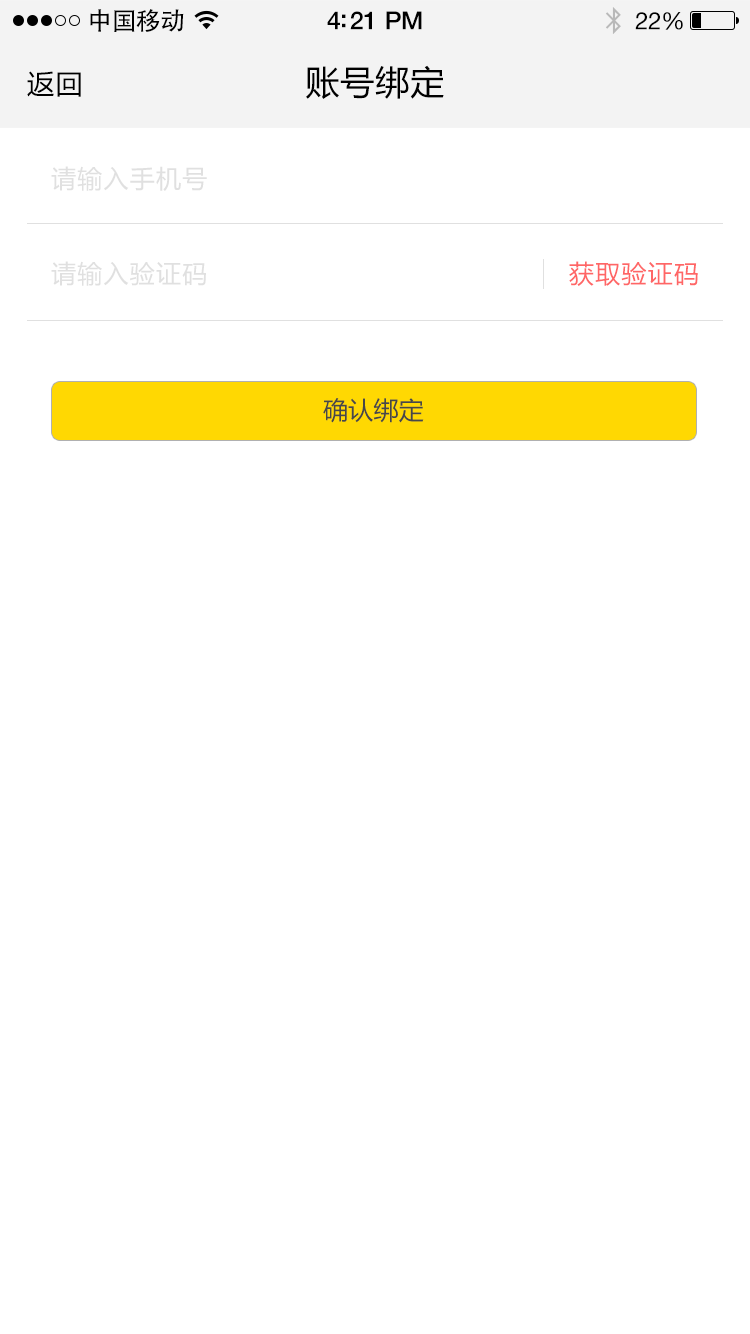
<style>
.page{position:relative;width:750px;height:1334px;background:#ffffff}
.page>*{position:absolute;margin:0}
.t1{font:25px "AdobeHeitiStd-Regular";letter-spacing:-0.025em;color:#000000}
.t2{font:25px "HelveticaNeue-Medium";letter-spacing:-0.02em;color:#000000}
.t3{font:24px "HelveticaNeue";letter-spacing:-0.02em;color:#000000}
.t4{font:34px "MicrosoftYaHei";letter-spacing:0.03em;color:#000000}
.t5{font:27px "MicrosoftYaHei";letter-spacing:0.05em;color:#000000}
.t6{font:25px "MicrosoftYaHei";letter-spacing:0.05em;color:#e0e0e0}
.t7{font:25px "MicrosoftYaHei";letter-spacing:0.05em;color:#ff6666}
.t8{font:25px "MicrosoftYaHei";letter-spacing:0.01em;color:#555555}
</style>
<div class="page">
<p class="t1" style="left:90px;top:9px;width:94px;height:23px">中国移动</p>
<p class="t2" style="left:327px;top:11px;width:95px;height:19px">4:21 PM</p>
<p class="t3" style="left:635px;top:12px;width:48px;height:18px">22%</p>
<p class="t4" style="left:306px;top:65px;width:138px;height:34px">账号绑定</p>
<p class="t5" style="left:27px;top:71px;width:54px;height:26px">返回</p>
<p class="t6" style="left:51px;top:166px;width:156px;height:25px">请输入手机号</p>
<p class="t6" style="left:51px;top:261px;width:155px;height:25px">请输入验证码</p>
<p class="t7" style="left:569px;top:261px;width:129px;height:25px">获取验证码</p>
<p class="t8" style="left:323px;top:398px;width:101px;height:25px">确认绑定</p>
</div>
